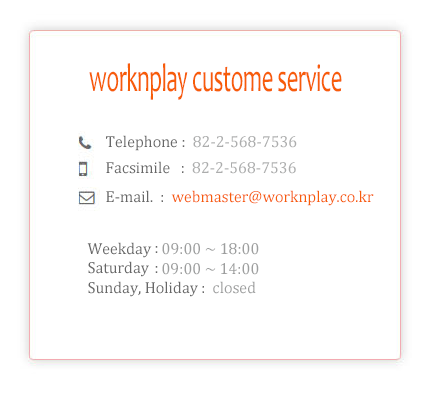
<style>
.page{position:relative;width:431px;height:396px;background:#ffffff}
.page>*{position:absolute;margin:0}
.t1{font:40px "Candara";letter-spacing:-0.025em;color:#f75d09;scale:0.58 1}
.t2{font:16px "CambriaMath";color:#acadad}
.t3{font:16px "CambriaMath";color:#676767}
.t4{font:16px "CambriaMath";color:#f75d09}
.t5{font:16px "CambriaMath";color:#9d9e9e}
</style>
<div class="page">
<p class="t1" style="left:89px;top:63px;width:253px;height:37px">worknplay custome service</p>
<p class="t2" style="left:106px;top:135px;width:191px;height:16px"><span class="t3">Telephone :  </span>82-2-568-7536</p>
<p class="t3" style="left:106px;top:161px;width:190px;height:13px">Facsimile   :  <span class="t2">82-2-568-7536</span></p>
<p class="t4" style="left:106px;top:190px;width:268px;height:16px"><span class="t3">E-mail.  :  </span>webmaster@worknplay.co.kr</p>
<p class="t5" style="left:87px;top:242px;width:172px;height:35px"><span class="t3">Weekday   </span>09:00 ~ 18:00<br><span class="t3">Saturday</span></p>
<p class="t3" style="left:155px;top:246px;width:3px;height:7px">:</p>
<p class="t3" style="left:155px;top:266px;width:3px;height:7px">:</p>
<p class="t5" style="left:162px;top:263px;width:97px;height:12px">09:00 ~ 14:00</p>
<p class="t3" style="left:88px;top:281px;width:168px;height:16px">Sunday, Holiday :  <span class="t5">closed</span></p>
</div>
